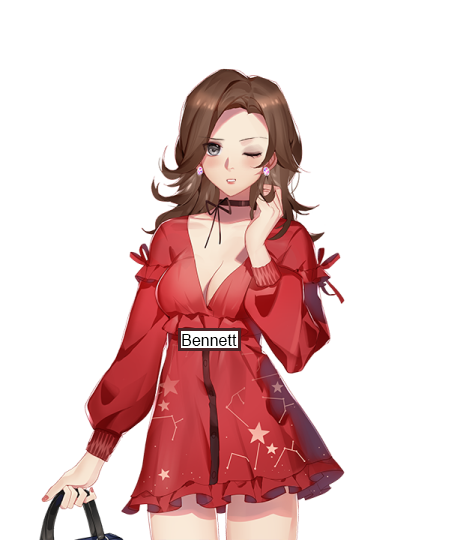
<style>
.page{position:relative;width:469px;height:540px;background:#ffffff}
.page>*{position:absolute;margin:0}
.t1{font:16px "ArialMT";color:#000000}
</style>
<div class="page">
<p class="t1" style="left:182px;top:334px;width:55px;height:12px">Bennett</p>
</div>
